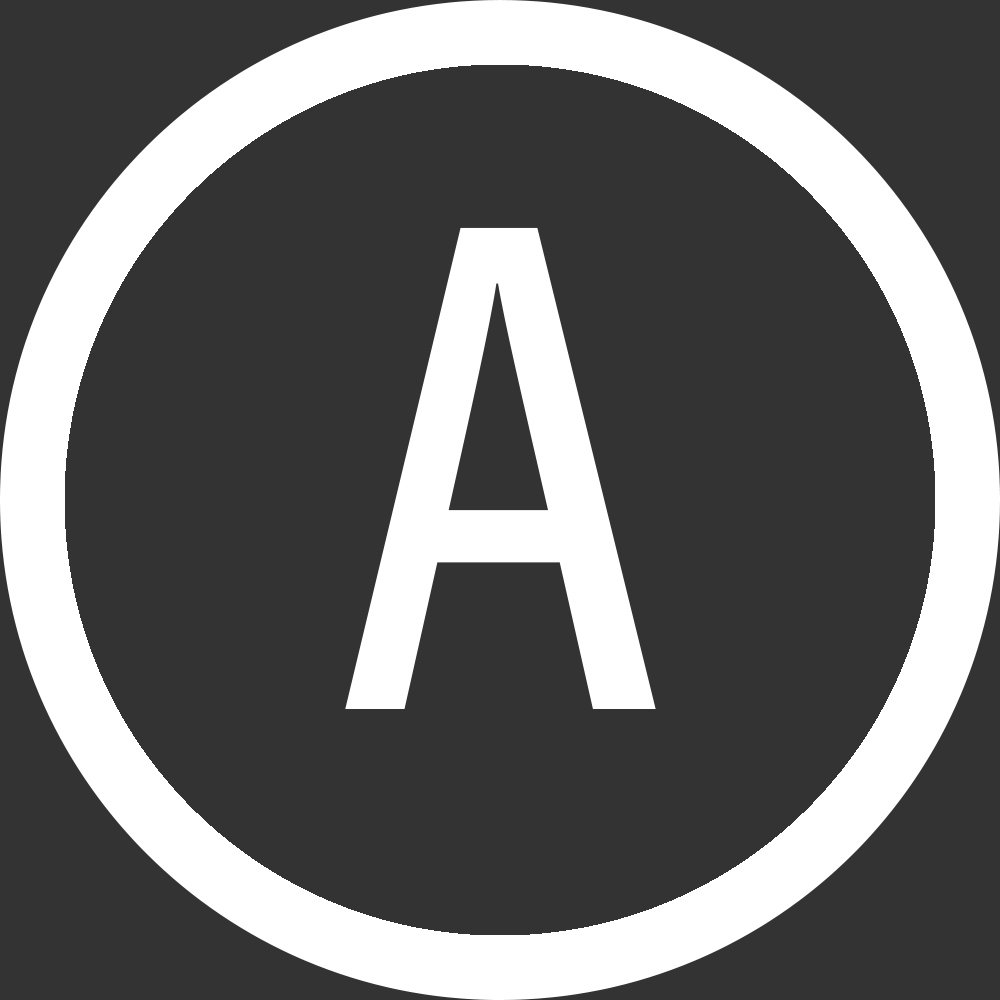
<style>
.page{position:relative;width:1000px;height:1000px;background:#333333}
.page>*{position:absolute;margin:0}
.t1{font:708.7px "AcuminConcept-CondensedMedium";color:#ffffff;text-transform:uppercase}
</style>
<div class="page">
<p class="t1" style="left:345px;top:227px;width:311px;height:482px">a</p>
</div>
